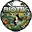
<style>
.page{position:relative;width:32px;height:32px;background:#ffffff}
.page>*{position:absolute;margin:0}
.t1{font:6.6px "MontserratItalic-BoldItalic"}
</style>
<div class="page">
<p class="t1" style="left:3px;top:7px;width:25px;height:6px">BIOTIK</p>
</div>
